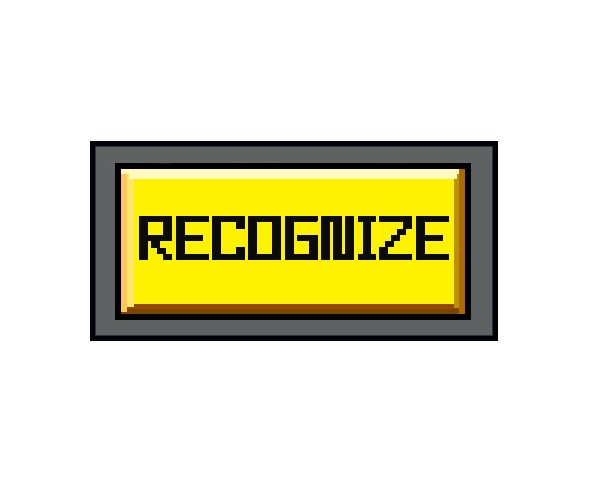
<style>
.page{position:relative;width:600px;height:500px;background:#ffffff}
.page>*{position:absolute;margin:0}
.t1{font:85px "14272BluemoonPixCersv.1.1";color:#0b0b0b}
</style>
<div class="page">
<p class="t1" style="left:139px;top:216px;width:307px;height:44px">RECOGNIZE</p>
<p class="t1" style="left:142px;top:216px;width:307px;height:44px">RECOGNIZE</p>
</div>
